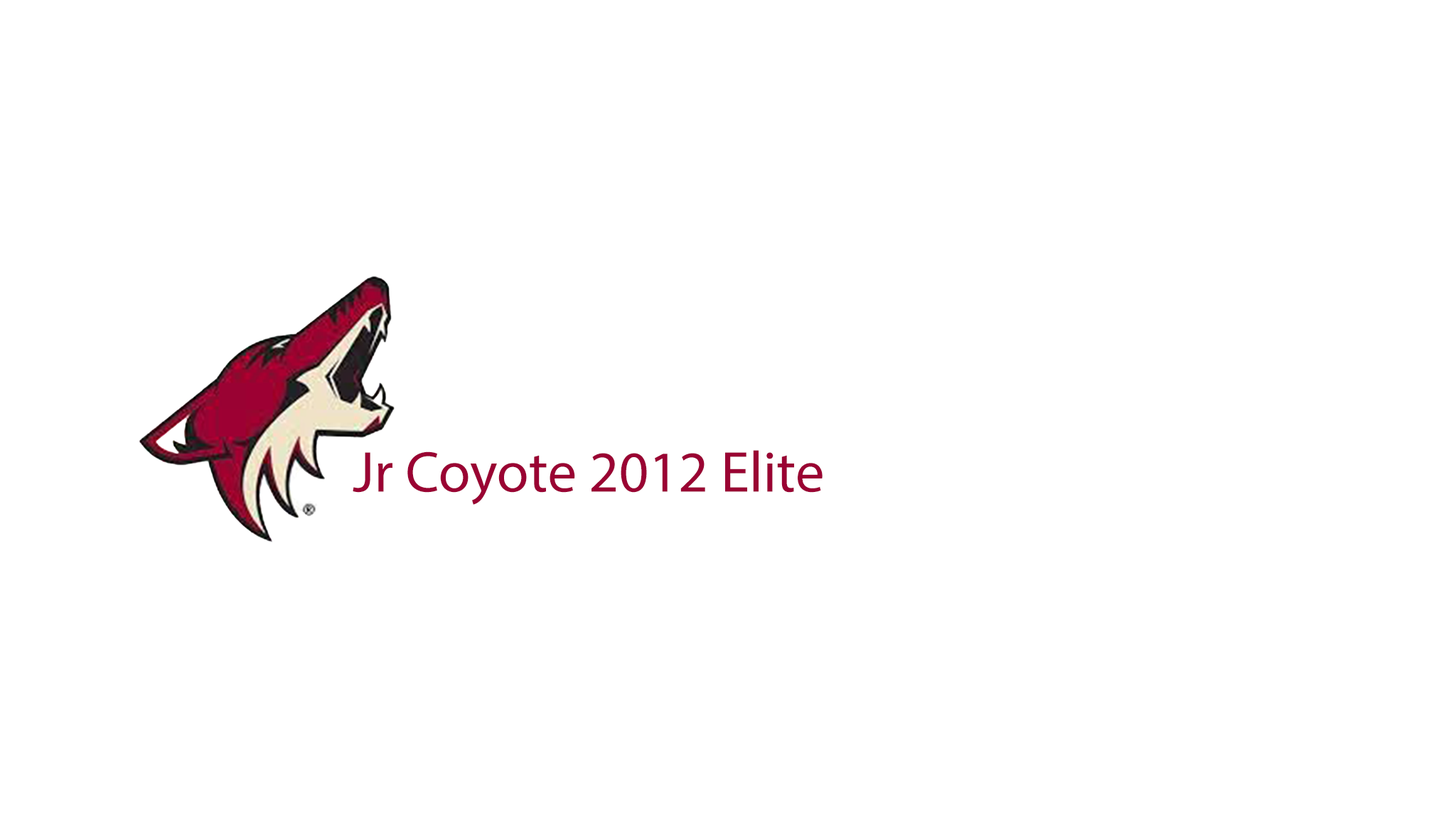
<style>
.page{position:relative;width:1456px;height:819px;background:#ffffff}
.page>*{position:absolute;margin:0}
.t1{font:58.1px "MyriadPro-Regular";color:#9a0233}
</style>
<div class="page">
<p class="t1" style="left:353px;top:450px;width:470px;height:55px">Jr Coyote 2012 Elite</p>
</div>
